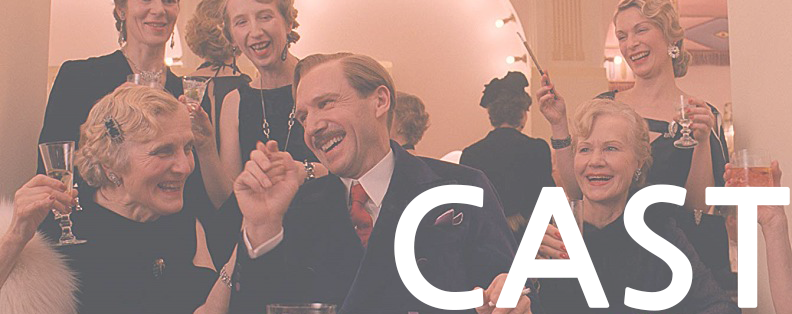
<style>
.page{position:relative;width:792px;height:314px}
.page>*{position:absolute;margin:0}
.t1{font:157.9px "NanumGothicBold";color:#ffffff;font-weight:bold}
</style>
<div class="page">
<p class="t1" style="left:394px;top:184px;width:396px;height:127px">CAST</p>
</div>
